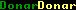
<style>
.page{position:relative;width:76px;height:10px;background:#000000}
.page>*{position:absolute;margin:0}
.t1{font:13.2px "Onesize";color:#009900;scale:0.91 1}
.t2{font:13.2px "Onesize";color:#ffff66;scale:0.91 1}
</style>
<div class="page">
<p class="t1" style="left:0px;top:1px;width:38px;height:8px">Donar</p>
<p class="t2" style="left:38px;top:1px;width:38px;height:8px">Donar</p>
</div>
